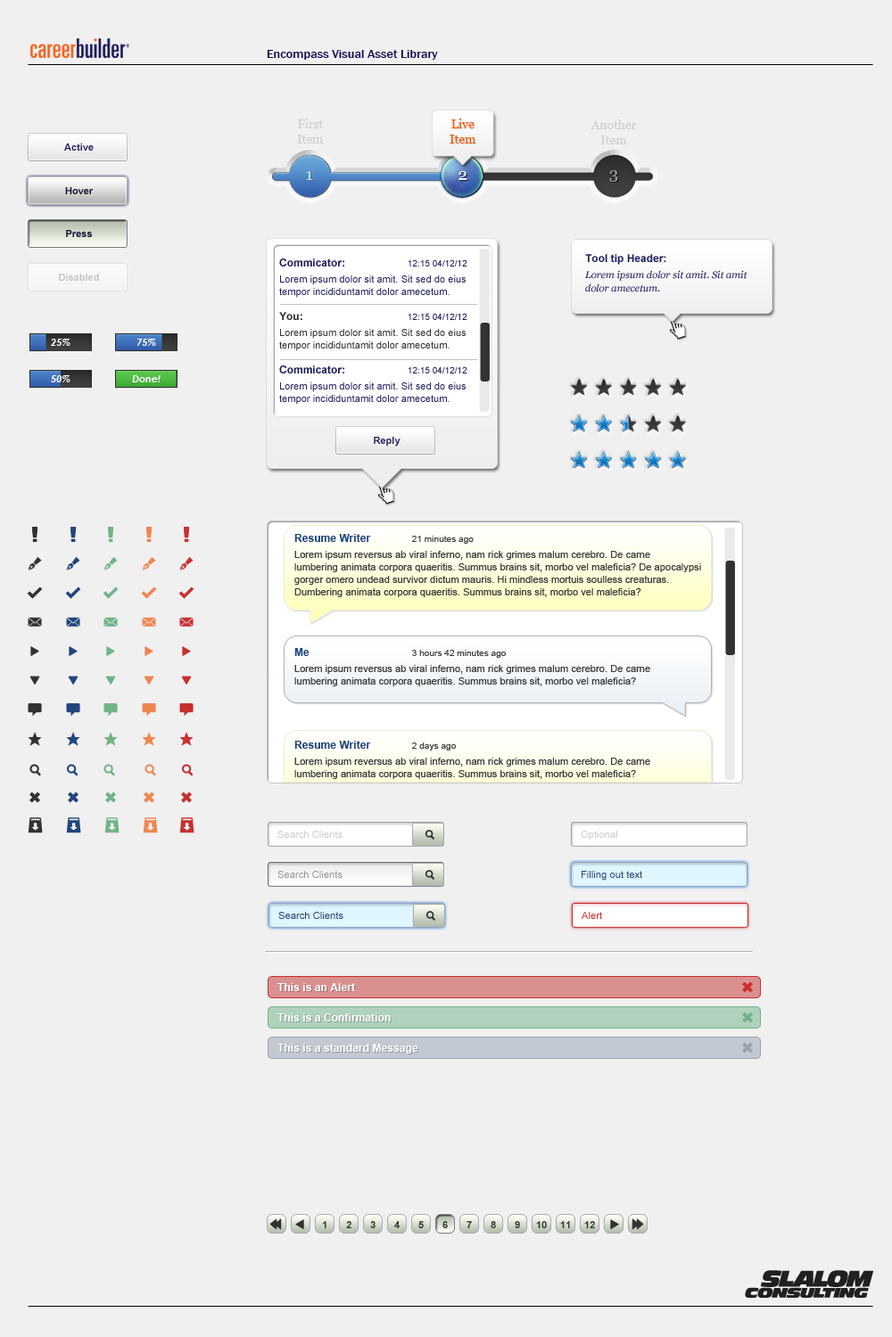
<style>
.page{position:relative;width:892px;height:1337px;background:#f0f0f0}
.page>*{position:absolute;margin:0}
.t1{font:12.5px "FranklinGothic-Medium";letter-spacing:0.005em;color:#0f0c51}
.t2{font:12.6px "Georgia";letter-spacing:-0.01em;color:#d1d1d1}
.t3{font:12.6px "Georgia";letter-spacing:-0.01em;color:#f16018}
.t4{font:9.8px "Arial-BoldMT";color:#20205f}
.t5{font:16.9px "Georgia";letter-spacing:0.005em;color:#ccdbe8}
.t6{font:16.9px "Georgia";letter-spacing:0.005em;color:#ffffff}
.t7{font:16.9px "Georgia";letter-spacing:0.005em;color:#a2a2a2}
.t8{font:9.8px "Arial-BoldMT";color:#0e0e2b}
.t9{font:9.8px/16px "Georgia-Italic";letter-spacing:0.005em;color:#20205f}
.t10{font:10.7px/16px "Arial-BoldMT";color:#20205f}
.t11{font:9.8px/13.4px "Georgia-Italic";letter-spacing:0.005em;color:#20205f}
.t12{font:9.8px/16px "ArialMT";letter-spacing:0.005em;color:#20205f}
.t13{font:10.7px/12.5px "Arial-BoldMT";color:#20205f}
.t14{font:8.9px/12.5px "ArialMT";color:#20205f}
.t15{font:9.8px/12.5px "ArialMT";letter-spacing:0.005em;color:#20205f}
.t16{font:10.7px/12.5px "Arial-BoldMT";color:#303030}
.t17{font:9.8px/16px "ArialMT";letter-spacing:0.005em;color:#303030}
.t18{font:9.8px/12.5px "ArialMT";letter-spacing:0.005em;color:#303030}
.t19{font:9.8px "Arial-BoldMT";color:#c3c3c3}
.t20{font:9.8px "CenturyGothic-BoldItalic";letter-spacing:0.005em;color:#ffffff}
.t21{font:9.8px/12.5px "ArialMT";letter-spacing:0.005em;color:#3c3c3c}
.t22{font:10.7px/23.2px "Arial-BoldMT";letter-spacing:0.005em;color:#21467b}
.t23{font:8.9px/23.2px "ArialMT";letter-spacing:0.005em;color:#3c3c3c}
.t24{font:9.8px/16px "ArialMT";letter-spacing:0.005em;color:#3c3c3c}
.t25{font:9.8px "ArialMT";color:#cccccc}
.t26{font:9.8px "ArialMT";color:#999999}
.t27{font:9.8px "ArialMT";color:#294676}
.t28{font:9.8px "ArialMT";color:#c73030}
.t29{font:10.7px "Arial-BoldMT";letter-spacing:0.005em;color:#ffffff}
.t30{font:9.8px "Arial-BoldMT";letter-spacing:0.005em;color:#373737}
</style>
<div class="page">
<p class="t1" style="left:267px;top:50px;width:171px;height:10px">Encompass Visual Asset Library</p>
<p class="t2" style="left:297px;top:119px;width:27px;height:25px;text-align:center">First<br>Item</p>
<p class="t3" style="left:449px;top:119px;width:27px;height:25px;text-align:center">Live<br>Item</p>
<p class="t2" style="left:590px;top:119px;width:47px;height:25px;text-align:center">Another<br>Item</p>
<p class="t4" style="left:64px;top:144px;width:30px;height:7px">Active</p>
<p class="t5" style="left:306px;top:171px;width:7px;height:9px">1</p>
<p class="t6" style="left:458px;top:171px;width:9px;height:9px">2</p>
<p class="t7" style="left:609px;top:170px;width:9px;height:12px">3</p>
<p class="t8" style="left:65px;top:187px;width:29px;height:7px">Hover</p>
<p class="t8" style="left:66px;top:230px;width:26px;height:7px">Press</p>
<p class="t9" style="left:584px;top:254px;width:163px;height:38px"><span class="t10">Tool tip Header:<br></span>Lorem ipsum dolor sit amit. Sit amit<br><span class="t11">dolor amecetum.</span></p>
<p class="t12" style="left:279px;top:259px;width:188px;height:146px"><span class="t13">Commicator:  </span><span class="t14">12:15 04/12/12<br></span>Lorem ipsum dolor sit amit. Sit sed do eius<br><span class="t15">tempor incididuntamit dolor amecetum. <br><br></span><span class="t16">You:    </span><span class="t14">12:15 04/12/12<br></span><span class="t17">Lorem ipsum dolor sit amit. Sit sed do eius <br></span><span class="t18">tempor incididuntamit dolor amecetum.<br><br></span><span class="t13">Commicator:  </span><span class="t14">12:15 04/12/12<br></span>Lorem ipsum dolor sit amit. Sit sed do eius <br><span class="t15">tempor incididuntamit dolor amecetum.</span></p>
<p class="t19" style="left:59px;top:274px;width:40px;height:7px">Disabled</p>
<p class="t20" style="left:51px;top:339px;width:19px;height:7px">25%</p>
<p class="t20" style="left:137px;top:339px;width:19px;height:7px">75%</p>
<p class="t20" style="left:51px;top:375px;width:19px;height:7px">50%</p>
<p class="t20" style="left:132px;top:375px;width:28px;height:7px">Done!</p>
<p class="t4" style="left:374px;top:437px;width:26px;height:10px">Reply</p>
<p class="t21" style="left:294px;top:534px;width:407px;height:63px"><span class="t22">Resume Writer        </span><span class="t23">21 minutes ago<br></span><span class="t24">Lorem ipsum reversus ab viral inferno, nam rick grimes malum cerebro. De carne<br></span>lumbering animata corpora quaeritis. Summus brains sit​​, morbo vel maleficia? De apocalypsi<br>gorger omero undead survivor dictum mauris. Hi mindless mortuis soulless creaturas. <br>Dumbering animata corpora quaeritis. Summus brains sit​​, morbo vel maleficia?</p>
<p class="t24" style="left:294px;top:648px;width:356px;height:39px"><span class="t22">Me          </span><span class="t23">3 hours 42 minutes ago<br></span>Lorem ipsum reversus ab viral inferno, nam rick grimes malum cerebro. De carne<br><span class="t21">lumbering animata corpora quaeritis. Summus brains sit​​, morbo vel maleficia?</span></p>
<p class="t24" style="left:294px;top:741px;width:356px;height:38px"><span class="t22">Resume Writer        </span><span class="t23">2 days ago<br></span>Lorem ipsum reversus ab viral inferno, nam rick grimes malum cerebro. De carne<br><span class="t21">lumbering animata corpora quaeritis. Summus brains sit​​, morbo vel maleficia?</span></p>
<p class="t25" style="left:277px;top:831px;width:65px;height:7px">Search Clients</p>
<p class="t25" style="left:580px;top:831px;width:37px;height:10px">Optional</p>
<p class="t26" style="left:277px;top:871px;width:65px;height:7px">Search Clients</p>
<p class="t27" style="left:581px;top:871px;width:61px;height:10px">Filling out text</p>
<p class="t27" style="left:278px;top:912px;width:65px;height:7px">Search Clients</p>
<p class="t28" style="left:581px;top:912px;width:21px;height:7px">Alert</p>
<p class="t29" style="left:277px;top:983px;width:78px;height:8px">This is an Alert</p>
<p class="t29" style="left:277px;top:1014px;width:114px;height:8px">This is a Confirmation</p>
<p class="t29" style="left:277px;top:1044px;width:141px;height:10px">This is a standard Message</p>
<p class="t30" style="left:323px;top:1221px;width:3px;height:8px">1</p>
<p class="t30" style="left:346px;top:1221px;width:5px;height:8px">2</p>
<p class="t30" style="left:370px;top:1221px;width:5px;height:8px">3</p>
<p class="t30" style="left:394px;top:1221px;width:5px;height:8px">4</p>
<p class="t30" style="left:418px;top:1221px;width:6px;height:8px">5</p>
<p class="t30" style="left:442px;top:1221px;width:6px;height:8px">6</p>
<p class="t30" style="left:466px;top:1221px;width:6px;height:8px">7</p>
<p class="t30" style="left:490px;top:1221px;width:6px;height:8px">8</p>
<p class="t30" style="left:514px;top:1221px;width:6px;height:8px">9</p>
<p class="t30" style="left:536px;top:1221px;width:11px;height:8px">10</p>
<p class="t30" style="left:560px;top:1221px;width:10px;height:8px">11</p>
<p class="t30" style="left:584px;top:1221px;width:11px;height:8px">12</p>
</div>
